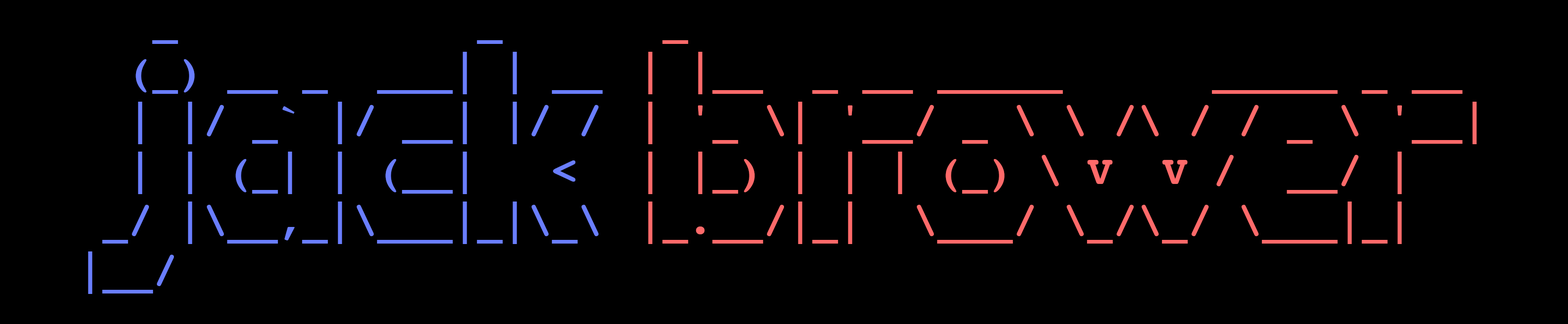
<style>
.page{position:relative;width:1568px;height:324px;background:#000000}
.page>*{position:absolute;margin:0}
.t1{font:41.6px "Courier-Bold";color:#6a7eff}
.t2{font:41.6px "Courier-Bold";color:#ff6a6a}
</style>
<div class="page">
<p class="t1" style="left:88px;top:40px;width:515px;height:254px">_            _<br>  (_) __ _  ___| | __<br>  | |/ _` |/ __| |/ /<br>  | | (_| | (__|   &lt;<br> _/ |\__,_|\___|_|\_\<br>|__/</p>
<p class="t2" style="left:648px;top:40px;width:829px;height:204px">_<br>| |__  _ __ _____      _____ _ __<br>| '_ \| '__/ _ \ \ /\ / / _ \ '__|<br>| |_) | | | (_) \ V  V /  __/ |<br>|_.__/|_|  \___/ \_/\_/ \___|_|</p>
</div>
